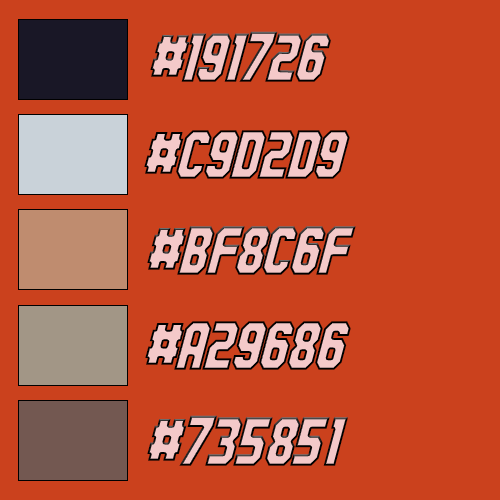
<style>
.page{position:relative;width:500px;height:500px;background:#cb411d}
.page>*{position:absolute;margin:0}
.t1{font:68.7px "HauserCondensed-BoldItalic";color:#f4c9c9}
</style>
<div class="page">
<p class="t1" style="left:150px;top:31px;width:181px;height:51px">#191726</p>
<p class="t1" style="left:144px;top:130px;width:206px;height:49px">#C9D2D9</p>
<p class="t1" style="left:147px;top:226px;width:209px;height:49px">#BF8C6F</p>
<p class="t1" style="left:145px;top:321px;width:206px;height:49px">#A29686</p>
<p class="t1" style="left:147px;top:415px;width:201px;height:51px">#735851</p>
</div>
